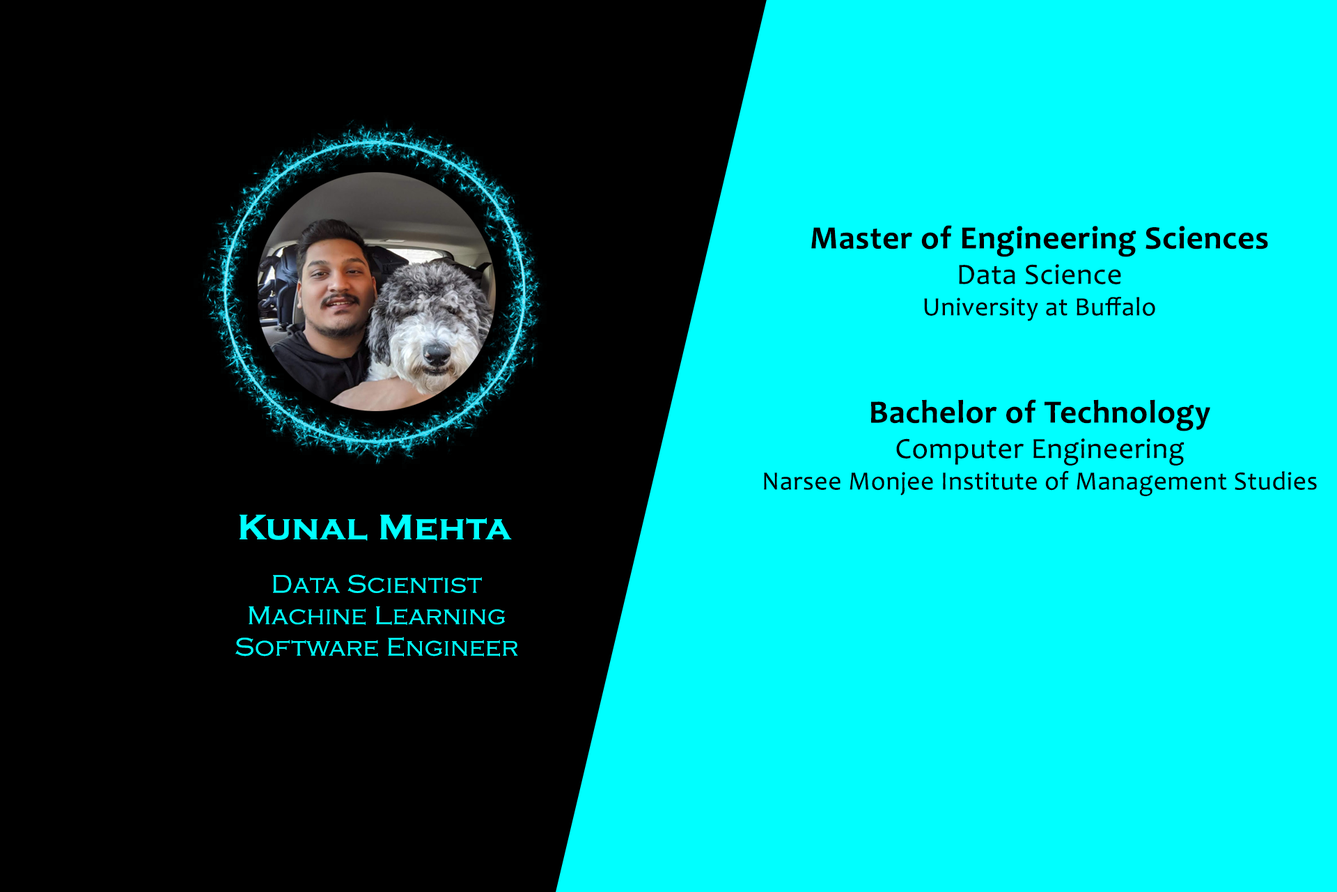
<style>
.page{position:relative;width:1337px;height:892px;background:#00ffff}
.page>*{position:absolute;margin:0}
.t1{font:32.7px "Candara-Bold";letter-spacing:0.02em;color:#000000}
.t2{font:29.5px "Candara";letter-spacing:0.02em;color:#000000}
.t3{font:26.2px "Candara";letter-spacing:0.02em;color:#000000}
.t4{font:36.6px "CopperplateGothic-Bold";letter-spacing:0.02em;color:#00ffff}
.t5{font:26.2px "CopperplateGothic-Light";letter-spacing:0.02em;color:#00ffff}
</style>
<div class="page">
<p class="t1" style="left:811px;top:225px;width:457px;height:96px;text-align:center">Master of Engineering Sciences<br><span class="t2">Data Science<br></span><span class="t3">University at Buffalo</span></p>
<p class="t3" style="left:764px;top:399px;width:553px;height:97px;text-align:center"><span class="t1">Bachelor of Technology<br></span><span class="t2">Computer Engineering<br></span>Narsee Monjee Institute of Management Studies</p>
<p class="t4" style="left:240px;top:514px;width:272px;height:27px">Kunal Mehta</p>
<p class="t5" style="left:235px;top:574px;width:283px;height:82px;text-align:center">Data Scientist<br>Machine Learning<br>Software Engineer</p>
</div>
